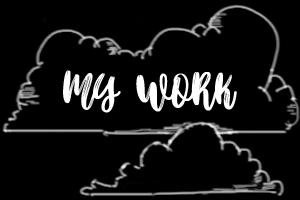
<style>
.page{position:relative;width:300px;height:200px;background:#000000}
.page>*{position:absolute;margin:0}
.t1{font:59.8px "BetterTogether-Script";color:#ffffff}
</style>
<div class="page">
<p class="t1" style="left:63px;top:70px;width:174px;height:43px">MY WORK</p>
</div>
